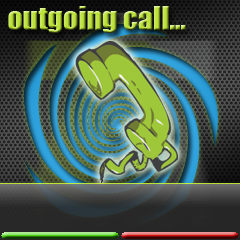
<style>
.page{position:relative;width:240px;height:240px}
.page>*{position:absolute;margin:0}
.t1{font:30px "Impact"}
</style>
<div class="page">
<p class="t1" style="left:8px;top:6px;width:178px;height:27px">outgoing call...</p>
</div>
